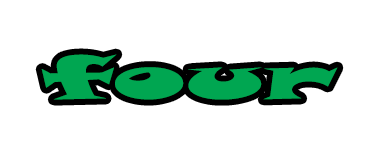
<style>
.page{position:relative;width:380px;height:161px;background:#ffffff}
.page>*{position:absolute;margin:0}
.t1{font:60px "SnapITC-Regular";color:#00a651;scale:2 1}
</style>
<div class="page">
<p class="t1" style="left:41px;top:54px;width:297px;height:46px">four</p>
</div>
